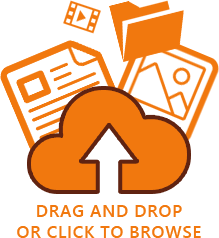
<style>
.page{position:relative;width:219px;height:238px;background:#ffffff}
.page>*{position:absolute;margin:0}
.t1{font:17.3px "WeblySleekUISemibold";letter-spacing:0.03em;color:#f1780e;text-transform:uppercase}
</style>
<div class="page">
<p class="t1" style="left:17px;top:205px;width:184px;height:33px;text-align:center">Drag and drop<br>or click to browse</p>
</div>
